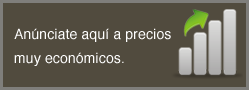
<style>
.page{position:relative;width:249px;height:90px;background:#514b3e}
.page>*{position:absolute;margin:0}
.t1{font:14px/24px "Helvetica";letter-spacing:0.01em;color:#ffffff}
</style>
<div class="page">
<p class="t1" style="left:14px;top:28px;width:157px;height:38px">Anúnciate aquí a precios muy económicos.</p>
</div>
